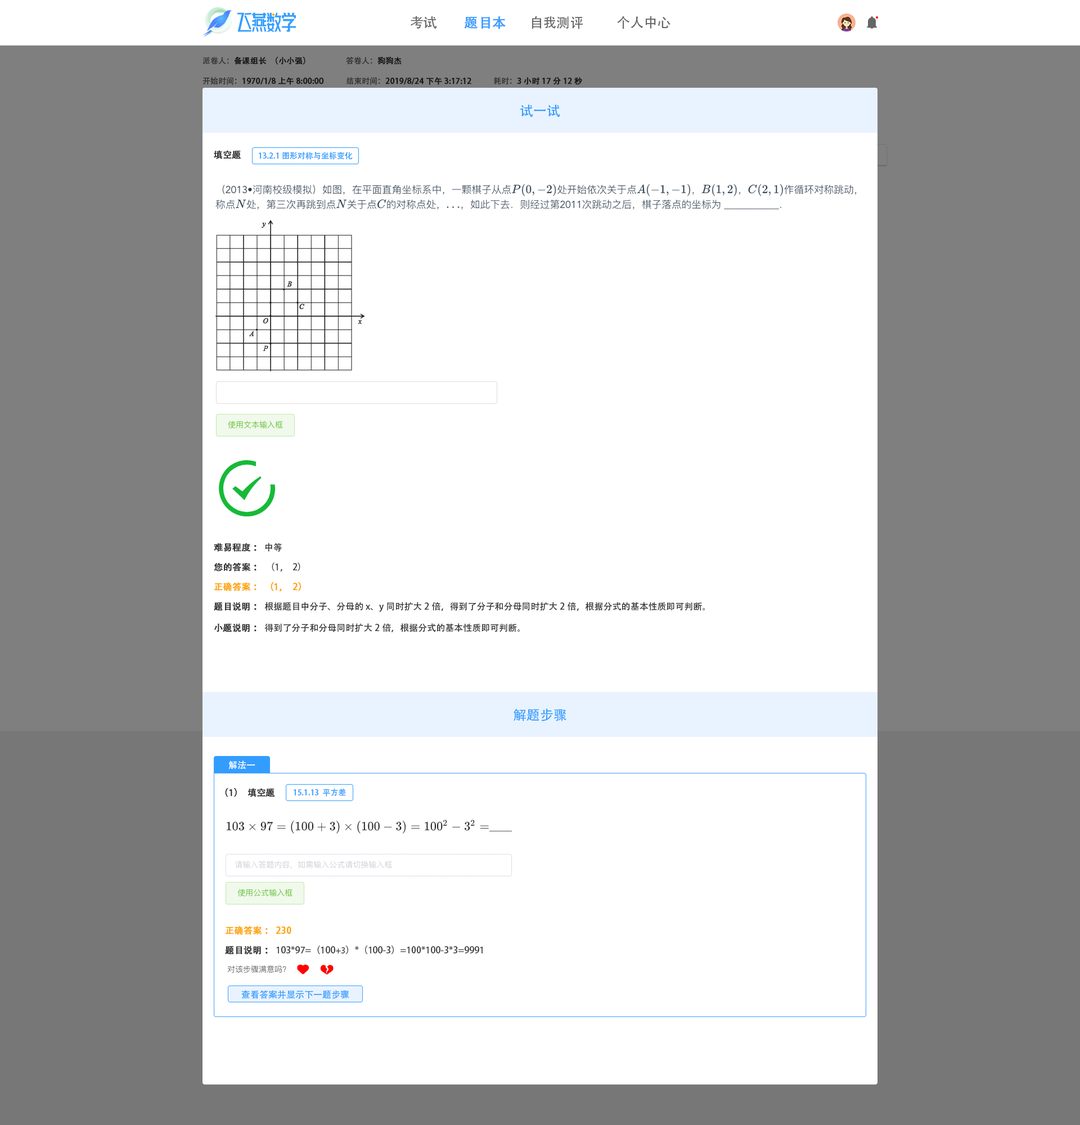
<style>
.page{position:relative;width:1080px;height:1125px;background:#ffffff}
.page>*{position:absolute;margin:0}
.t1{font:13.5px "AdobeHeitiStd-Regular";color:#666666}
.t2{font:13.5px "AdobeHeitiStd-Regular";color:#409eff;font-weight:bold}
.t3{font:7.9px "AdobeHeitiStd-Regular";color:#191919;font-weight:bold}
.t4{font:7.9px "AdobeHeitiStd-Regular";color:#191919}
.t5{font:7.9px "AdobeHeitiStd-Regular"}
.t6{font:7.9px "AdobeHeitiStd-Regular";font-weight:bold}
.t7{font:13.5px "AdobeHeitiStd-Regular";color:#339dff}
.t8{font:9px "AdobeHeitiStd-Regular";color:#333333;font-weight:bold}
.t9{font:7.9px "AdobeHeitiStd-Regular";color:#339dff}
.t10{font:9px "AdobeHeitiStd-Regular";color:#333333}
.t11{font:9px "AdobeHeitiStd-Regular";color:#fea300;font-weight:bold}
.t12{font:9px "AdobeHeitiStd-Regular";color:#ffffff}
.t13{font:9px "MyriadPro-Regular";color:#333333}
.t14{font:9px "AdobeHeitiStd-Regular";color:#339dff}
</style>
<div class="page">
<p class="t1" style="left:410px;top:16px;width:27px;height:13px">考试</p>
<p class="t2" style="left:464px;top:16px;width:42px;height:13px">题目本</p>
<p class="t1" style="left:532px;top:16px;width:51px;height:13px">自我测评</p>
<p class="t1" style="left:617px;top:16px;width:53px;height:13px">个人中心</p>
<p class="t3" style="left:202px;top:57px;width:103px;height:8px"><span class="t4">派卷人：</span>备课组长（小小强）</p>
<p class="t5" style="left:346px;top:56px;width:56px;height:9px">答卷人：<span class="t6">狗狗杰</span></p>
<p class="t3" style="left:202px;top:77px;width:122px;height:8px"><span class="t4">开始时间：</span>1970/1/8 上午8:00:00</p>
<p class="t6" style="left:346px;top:77px;width:125px;height:8px"><span class="t5">结束时间：</span>2019/8/24 下午3:17:12</p>
<p class="t3" style="left:494px;top:77px;width:88px;height:8px"><span class="t4">耗时：</span>3小时17分12秒</p>
<p class="t7" style="left:520px;top:105px;width:40px;height:12px">试一试</p>
<p class="t8" style="left:214px;top:150px;width:27px;height:9px">填空题</p>
<p class="t9" style="left:259px;top:151px;width:94px;height:9px">13.2.1图形对称与坐标变化</p>
<p class="t8" style="left:214px;top:543px;width:68px;height:9px">难易程度：<span class="t10"> 中等</span></p>
<p class="t10" style="left:214px;top:562px;width:86px;height:10px"><span class="t8">您的答案：</span>    （1，    2）</p>
<p class="t11" style="left:214px;top:582px;width:87px;height:10px">正确答案： （1，2）</p>
<p class="t10" style="left:214px;top:602px;width:491px;height:10px"><span class="t8">题目说明： </span>根据题目中分子、分母的x、y同时扩大2倍，得到了分子和分母同时扩大2倍，根据分式的基本性质即可判断。</p>
<p class="t10" style="left:214px;top:623px;width:306px;height:9px"><span class="t8">小题说明：</span>得到了分子和分母同时扩大2倍，根据分式的基本性质即可判断。</p>
<p class="t7" style="left:514px;top:709px;width:52px;height:12px">解题步骤</p>
<p class="t12" style="left:228px;top:760px;width:27px;height:10px">解法一</p>
<p class="t8" style="left:225px;top:788px;width:50px;height:9px">（1）填空题</p>
<p class="t9" style="left:294px;top:789px;width:52px;height:7px">15.1.13  平方差</p>
<p class="t11" style="left:226px;top:926px;width:65px;height:9px">正确答案： 230</p>
<p class="t10" style="left:225px;top:946px;width:258px;height:9px"><span class="t8">题目说明：</span>103*97=（100<span class="t13">+3</span>）*（100-3）=100*100-3*3=9991</p>
<p class="t14" style="left:241px;top:990px;width:108px;height:9px">查看答案并显示下一题步骤</p>
</div>
